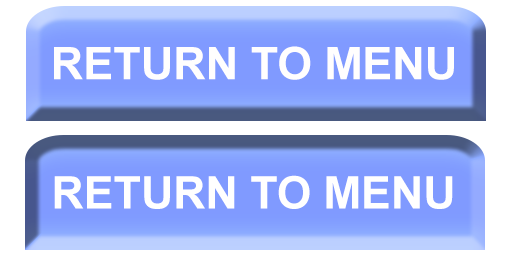
<style>
.page{position:relative;width:512px;height:256px;background:#ffffff}
.page>*{position:absolute;margin:0}
.t1{font:45px "Arial-BoldMT";color:#fffefe}
.t2{font:45px "Arial-BoldMT";color:#ffffff}
</style>
<div class="page">
<p class="t1" style="left:54px;top:46px;width:400px;height:34px">RETURN TO MENU</p>
<p class="t2" style="left:54px;top:175px;width:399px;height:34px">RETURN TO MENU</p>
</div>
